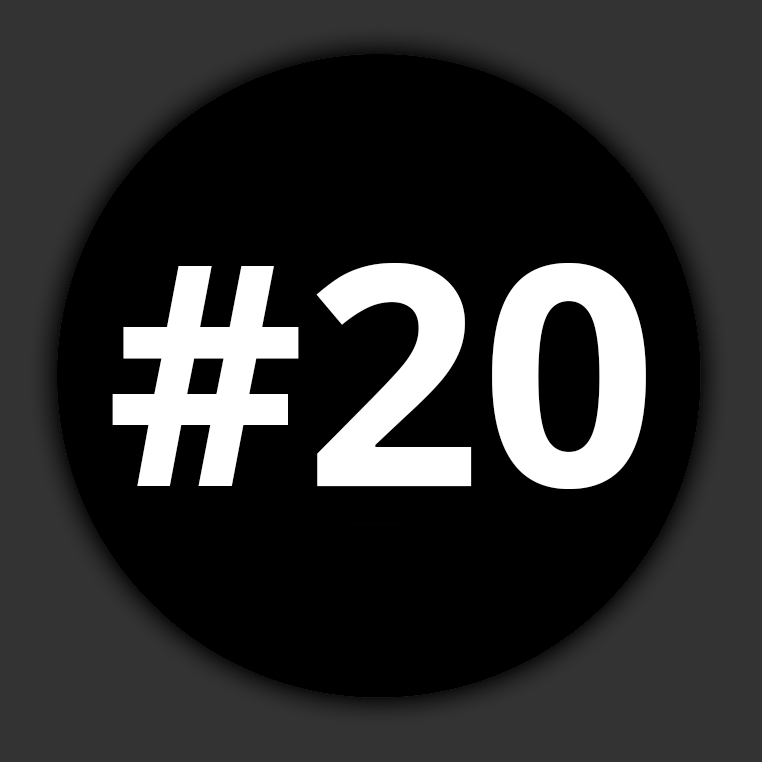
<style>
.page{position:relative;width:762px;height:762px;background:#000000}
.page>*{position:absolute;margin:0}
.t1{font:308px "OpenSans-Bold";color:#ffffff}
</style>
<div class="page">
<p class="t1" style="left:112px;top:263px;width:534px;height:226px">#20</p>
</div>
